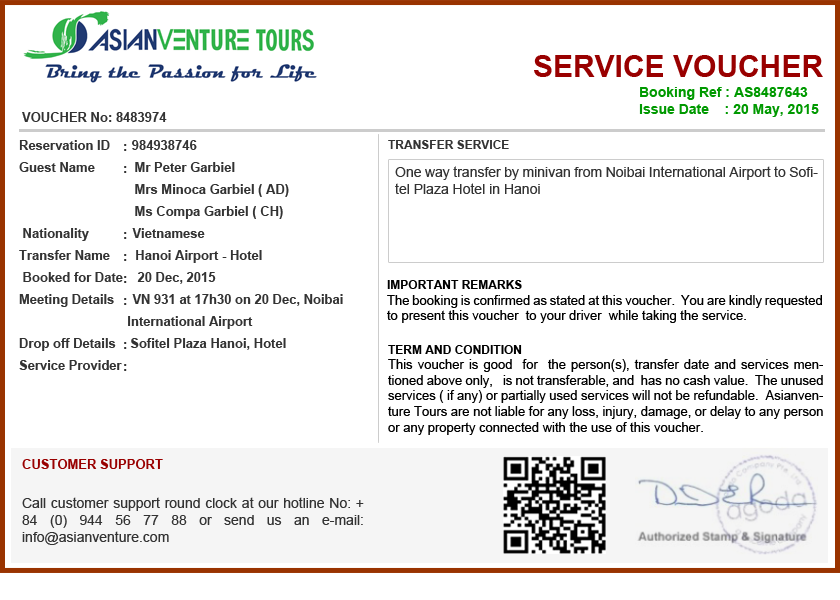
<style>
.page{position:relative;width:840px;height:600px;background:#ffffff}
.page>*{position:absolute;margin:0}
.t1{font:30px "Arial-BoldMT";color:#990000}
.t2{font:14px "Arial-BoldMT";color:#009900}
.t3{font:13px "Arial-BoldMT";color:#333333}
.t4{font:13px/22px "Arial-BoldMT";color:#333333}
.t5{font:12px "Arial-BoldMT";color:#333333}
.t6{font:14px "ArialMT";color:#333333}
.t7{font:13px "ArialMT";color:#000000}
.t8{font:12px "Arial-BoldMT";color:#000000}
.t9{font:13px/22px "Arial-BoldMT";color:#990000}
</style>
<div class="page">
<p class="t1" style="left:534px;top:55px;width:289px;height:22px">SERVICE VOUCHER</p>
<p class="t2" style="left:639px;top:87px;width:180px;height:30px;text-align:justify">Booking Ref : AS8487643<br>Issue Date    : 20 May, 2015</p>
<p class="t3" style="left:22px;top:112px;width:145px;height:10px">VOUCHER No: 8483974</p>
<p class="t4" style="left:19px;top:140px;width:324px;height:230px;text-align:justify">Reservation ID      984938746<br>Guest Name           Mr Peter Garbiel<br>                                Mrs Minoca Garbiel ( AD)<br>                                Ms Compa Garbiel ( CH) <br> Nationality            Vietnamese <br>Transfer Name       Hanoi Airport - Hotel<br> Booked for Date    20 Dec, 2015<br>Meeting Details     VN 931 at 17h30 on 20 Dec, Noibai <br>                              International Airport <br>Drop off Details    Sofitel Plaza Hanoi, Hotel<br>Service Provider</p>
<p class="t4" style="left:124px;top:144px;width:3px;height:227px;text-align:justify">:<br>:<br><br><br>:<br>:<br>:<br>:<br><br>:<br>:</p>
<p class="t5" style="left:388px;top:140px;width:121px;height:9px">TRANSFER SERVICE</p>
<p class="t6" style="left:395px;top:166px;width:423px;height:28px;text-align:justify">One way transfer by minivan from Noibai International Airport to Sofitel Plaza Hotel in Hanoi</p>
<p class="t7" style="left:387px;top:280px;width:435px;height:43px;text-align:justify"><span class="t8">IMPORTANT REMARKS <br></span>The booking is confirmed as stated at this voucher.  You are kindly requested to present this voucher  to your driver  while taking the service.</p>
<p class="t7" style="left:388px;top:345px;width:435px;height:90px;text-align:justify"><span class="t8">TERM AND CONDITION <br></span>This voucher is good  for  the person(s), transfer date and services mentioned above only,   is not transferable, and  has no cash value.  The unused services ( if any) or partially used services will not be refundable.  Asianventure Tours are not liable for any loss, injury, damage, or delay to any person or any property connected with the use of this voucher.</p>
<p class="t6" style="left:22px;top:459px;width:342px;height:86px"><span class="t9">CUSTOMER SUPPORT<br><br></span>Call customer support round clock at our hotline No: + 84 (0) 944 56 77 88 or send us an e-mail:  info@asianventure.com</p>
</div>
